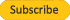
<style>
.page{position:relative;width:70px;height:20px;background:#fec513}
.page>*{position:absolute;margin:0}
.t1{font:12.4px "Calibri";color:#333333}
</style>
<div class="page">
<p class="t1" style="left:10px;top:5px;width:49px;height:9px">Subscribe</p>
</div>
